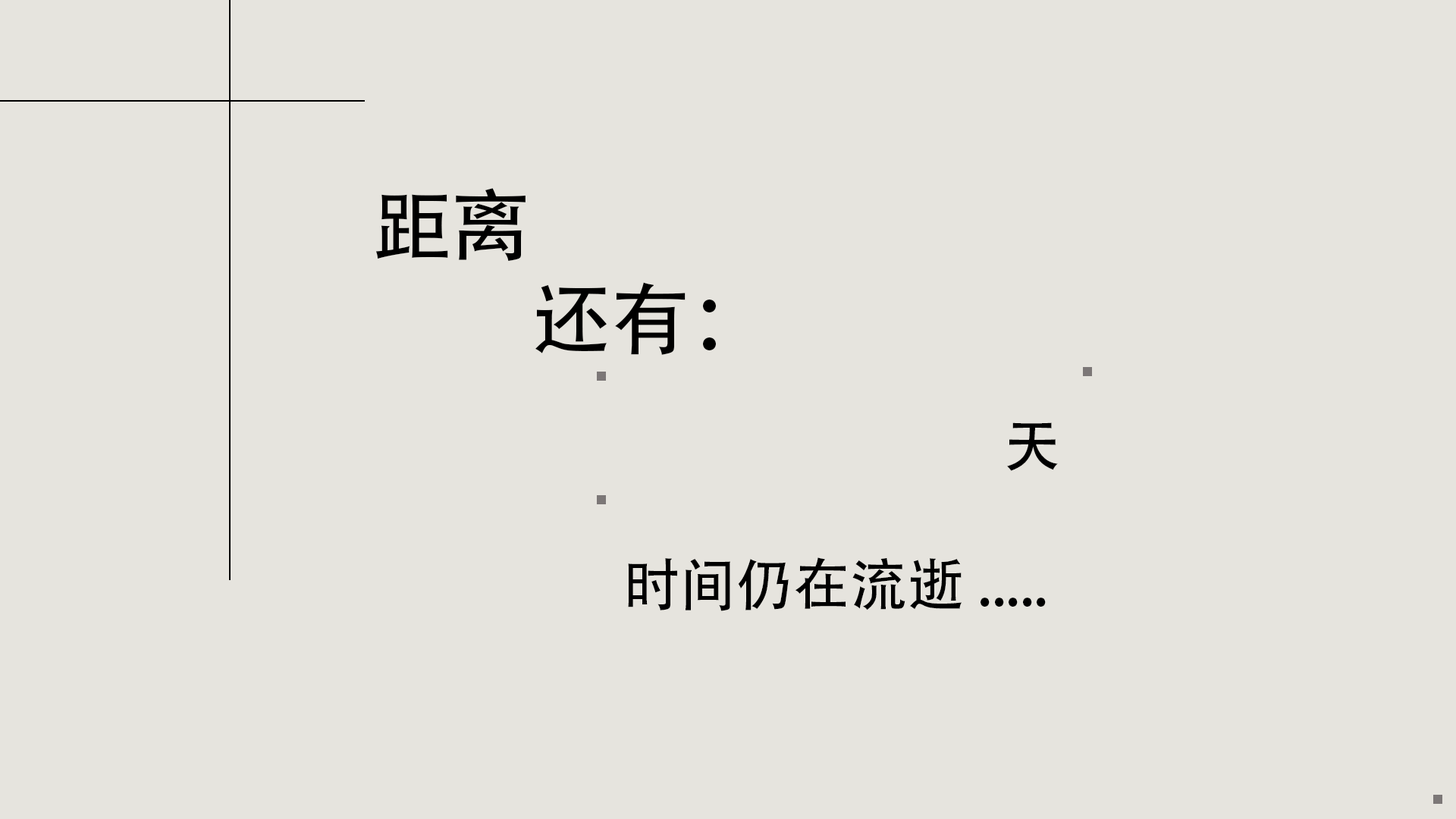
<style>
.page{position:relative;width:1456px;height:819px;background:#e6e4de}
.page>*{position:absolute;margin:0}
.t1{font:79px/94.8px "AdobeHeitiStd-Regular";color:#000000}
.t2{font:56.9px "AdobeHeitiStd-Regular";color:#000000}
</style>
<div class="page">
<p class="t1" style="left:375px;top:188px;width:341px;height:167px">距离<br>         还有：</p>
<p class="t2" style="left:1007px;top:422px;width:51px;height:49px">天</p>
<p class="t2" style="left:628px;top:557px;width:418px;height:54px">时间仍在流逝.....</p>
</div>
